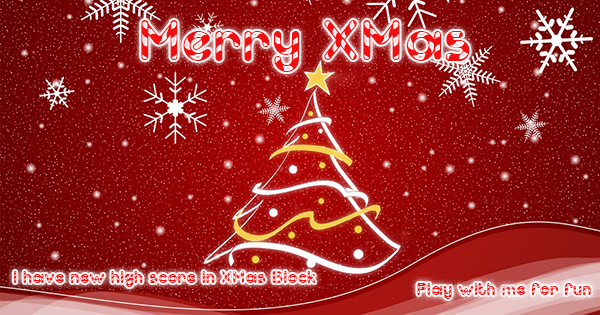
<style>
.page{position:relative;width:600px;height:315px}
.page>*{position:absolute;margin:0}
.t1{font:60px "CandyCaneUnregistered";color:#ef1111}
.t2{font:18px "CandyCaneUnregistered";color:#ef1111}
</style>
<div class="page">
<p class="t1" style="left:141px;top:20px;width:329px;height:52px">Merry XMas</p>
<p class="t2" style="left:13px;top:271px;width:303px;height:16px">I have new high score in XMas Block</p>
<p class="t2" style="left:417px;top:283px;width:174px;height:16px">Play with me for fun</p>
</div>
